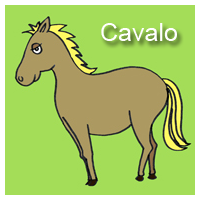
<style>
.page{position:relative;width:200px;height:200px;background:#a4dd58}
.page>*{position:absolute;margin:0}
.t1{font:25px "ArialMT";color:#ffffff}
</style>
<div class="page">
<p class="t1" style="left:101px;top:23px;width:76px;height:18px">Cavalo</p>
</div>
